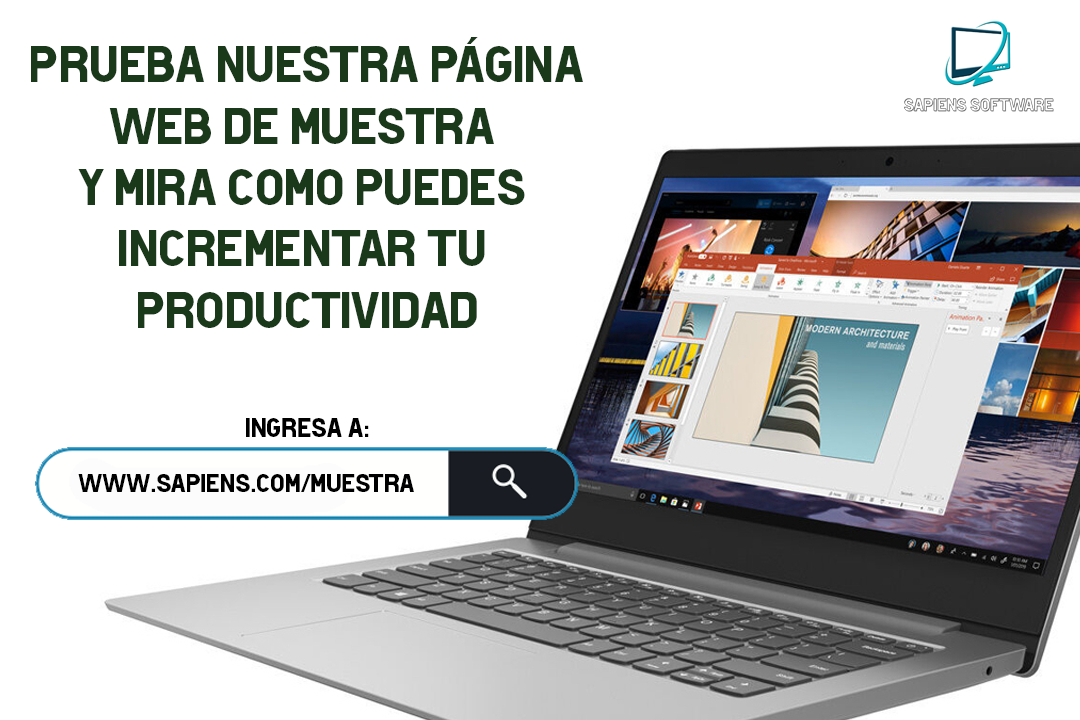
<style>
.page{position:relative;width:1080px;height:720px;background:#ffffff}
.page>*{position:absolute;margin:0}
.t1{font:51.1px "HotelDeParisXe";color:#1a391a}
.t2{font:26.9px "HotelDeParisXe";color:#000000}
.t3{font:26px "HotelDeParisXe";color:#000000}
</style>
<div class="page">
<p class="t1" style="left:31px;top:37px;width:552px;height:291px;text-align:center">prueba nuestra página<br>web de muestra <br>y mira como puedes <br>incrementar tu <br>productividad</p>
<p class="t2" style="left:246px;top:418px;width:123px;height:19px">Ingresa a:</p>
<p class="t3" style="left:78px;top:474px;width:336px;height:18px">www.sapiens.com/muestra</p>
</div>
